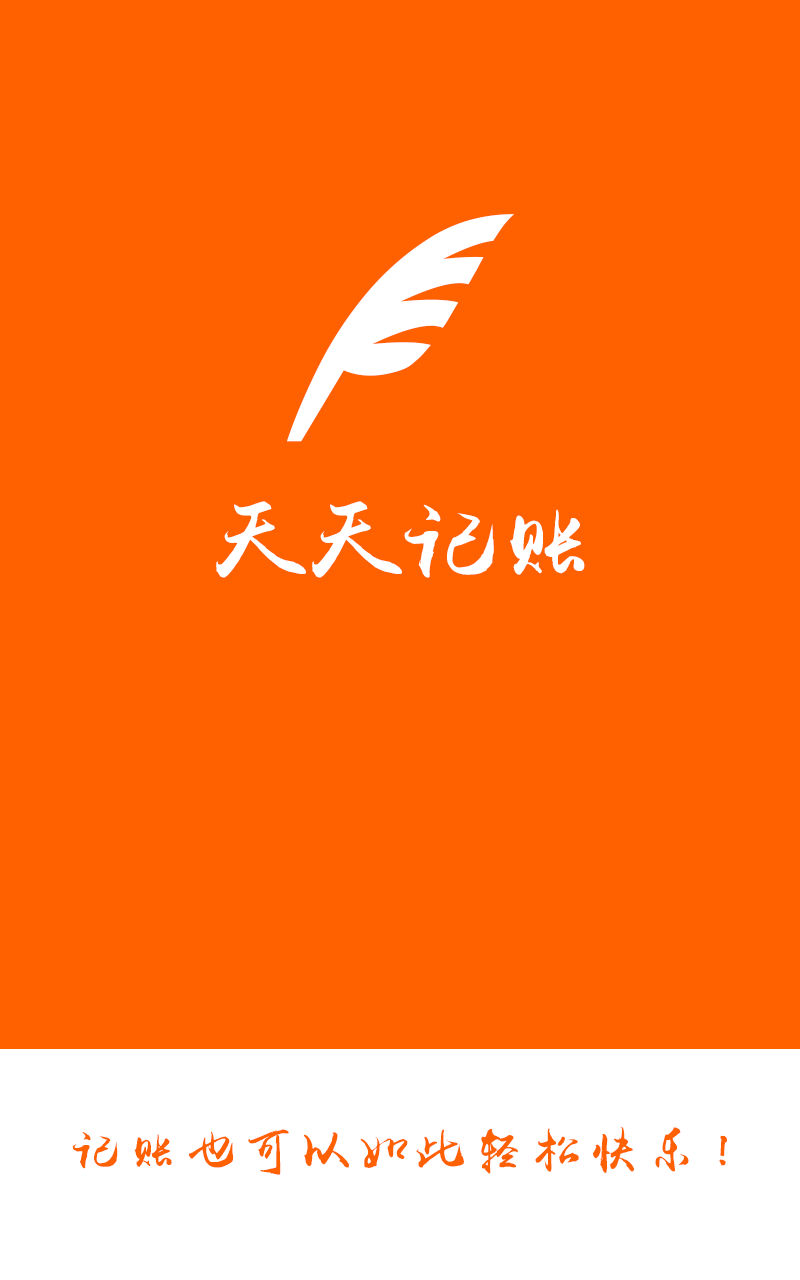
<style>
.page{position:relative;width:800px;height:1280px;background:#ff6000}
.page>*{position:absolute;margin:0}
.t1{font:96px "yuweij";color:#ffffff}
.t2{font:48px "yuweij";letter-spacing:0.2em;color:#ff6000}
</style>
<div class="page">
<p class="t1" style="left:216px;top:501px;width:369px;height:77px">天天记账</p>
<p class="t2" style="left:72px;top:1127px;width:655px;height:48px">记账也可以如此轻松快乐！</p>
</div>
